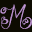
<style>
.page{position:relative;width:32px;height:32px;background:#0d0b01}
.page>*{position:absolute;margin:0}
.t1{font:24px "MTFUnderYourSkin";color:#be94d1}
</style>
<div class="page">
<p class="t1" style="left:0px;top:4px;width:32px;height:25px">M</p>
</div>
